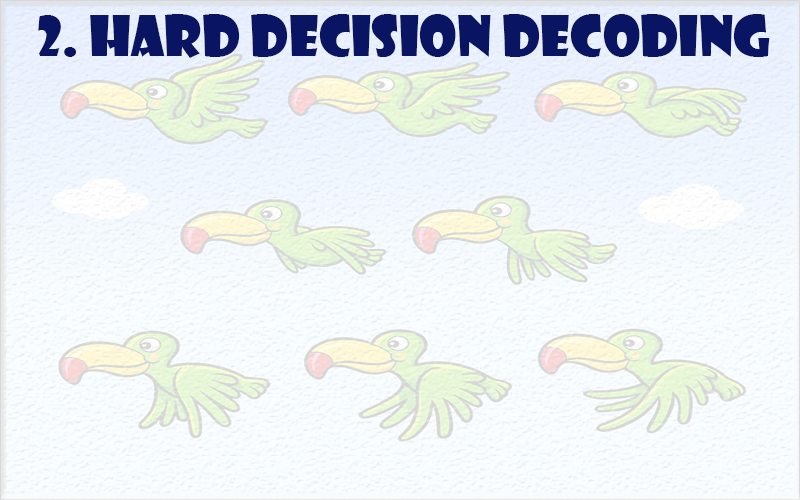
<style>
.page{position:relative;width:800px;height:500px}
.page>*{position:absolute;margin:0}
.t1{font:54.2px "ShowcardGothic-Reg";color:#091562}
</style>
<div class="page">
<p class="t1" style="left:38px;top:14px;width:732px;height:44px">2. HARD DECISION DECODING</p>
</div>
